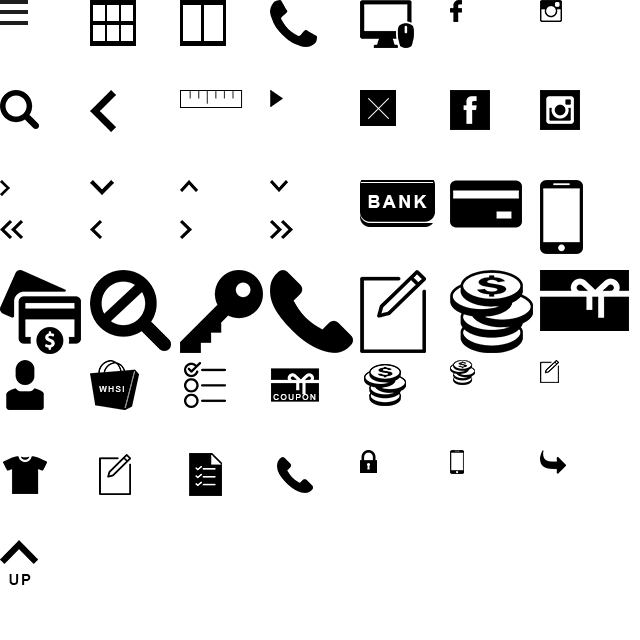
<style>
.page{position:relative;width:640px;height:640px;background:#ffffff}
.page>*{position:absolute;margin:0}
.t1{font:8.5px "ArialMT";letter-spacing:0.15em;color:#ffffff;text-transform:uppercase}
.t2{font:15.2px "Arial-BoldMT";letter-spacing:0.1em;color:#000000}
</style>
<div class="page">
<p class="t1" style="left:99px;top:386px;width:25px;height:6px">whsi</p>
<p class="t1" style="left:273px;top:394px;width:43px;height:6px">coupon</p>
<p class="t2" style="left:9px;top:574px;width:22px;height:11px">UP</p>
</div>
